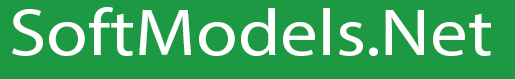
<style>
.page{position:relative;width:515px;height:79px;background:#1d9943}
.page>*{position:absolute;margin:0}
.t1{font:66.7px "MyriadPro-Regular";color:#ffffff;scale:1.13 1}
</style>
<div class="page">
<p class="t1" style="left:12px;top:7px;width:479px;height:49px">SoftModels.Net</p>
</div>
